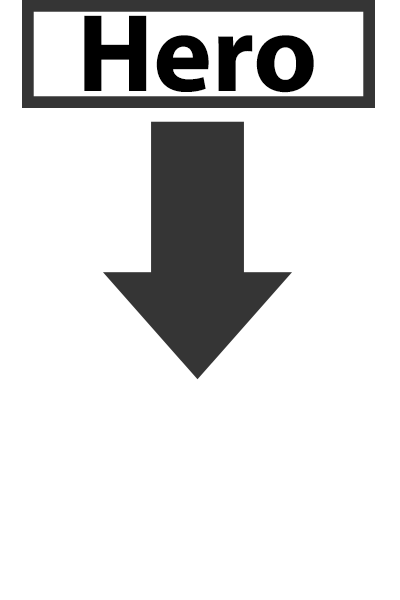
<style>
.page{position:relative;width:400px;height:600px;background:#ffffff}
.page>*{position:absolute;margin:0}
.t1{font:111.1px "MyriadPro-Bold";color:#000000}
</style>
<div class="page">
<p class="t1" style="left:84px;top:15px;width:230px;height:78px">Hero</p>
</div>
